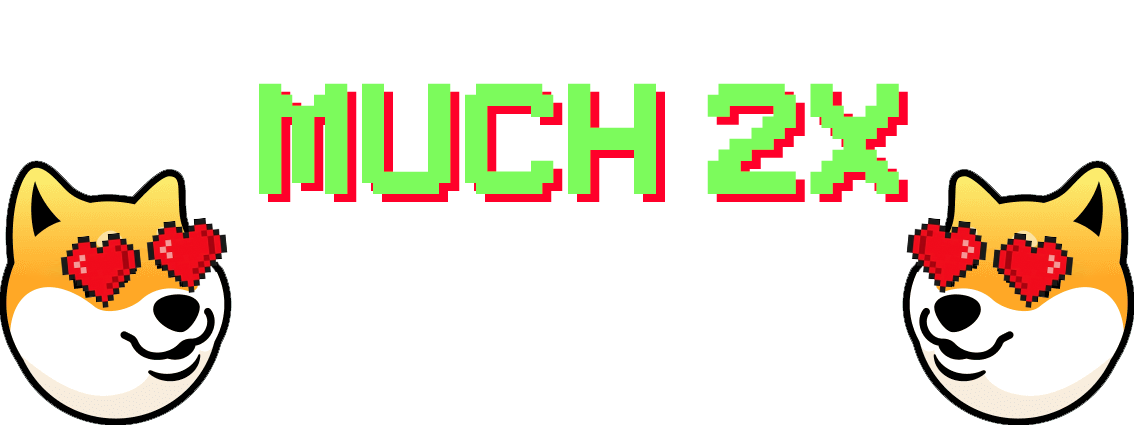
<style>
.page{position:relative;width:1134px;height:425px;background:#ffffff}
.page>*{position:absolute;margin:0}
.t1{font:220px "Pixeboy";color:#7cfb5c}
.t2{font:220px "Pixeboy"}
</style>
<div class="page">
<p class="t1" style="left:259px;top:83px;width:640px;height:111px">Much 2x</p>
<p class="t2" style="left:268px;top:91px;width:640px;height:111px">much 2x</p>
</div>
